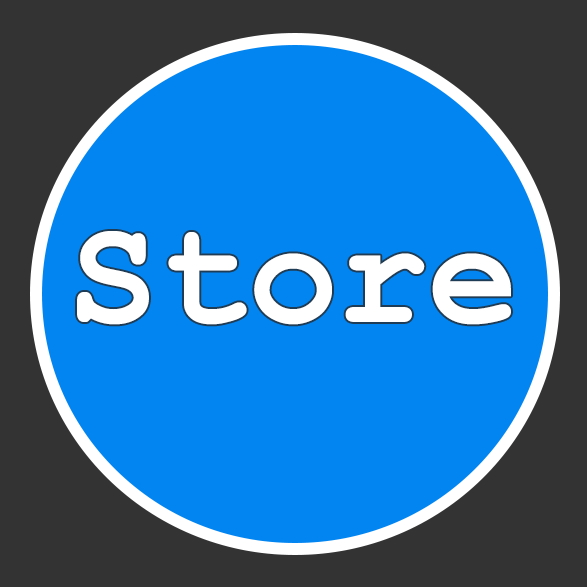
<style>
.page{position:relative;width:587px;height:587px;background:#0285f1}
.page>*{position:absolute;margin:0}
.t1{font:150.1px "CourierNewPS-BoldMT";color:#ffffff}
</style>
<div class="page">
<p class="t1" style="left:77px;top:231px;width:434px;height:94px">Store</p>
</div>
